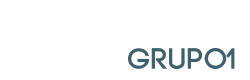
<style>
.page{position:relative;width:250px;height:80px;background:#ffffff}
.page>*{position:absolute;margin:0}
.t1{font:30px "Code-Pro-Demo";color:#3e606f}
</style>
<div class="page">
<p class="t1" style="left:128px;top:48px;width:107px;height:21px">Grupo1</p>
</div>
